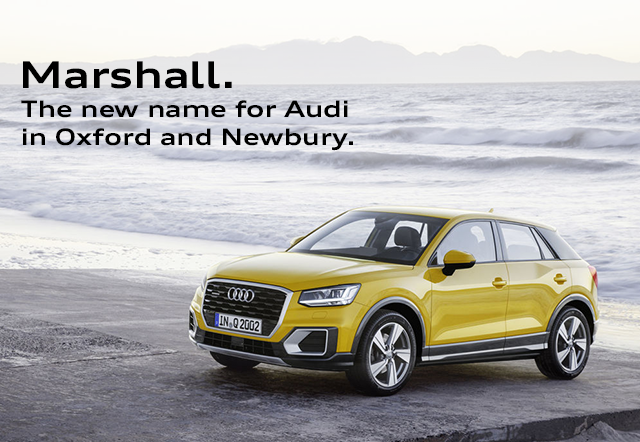
<style>
.page{position:relative;width:640px;height:442px}
.page>*{position:absolute;margin:0}
.t1{font:37px "AudiType-ExtendedBold";color:#000000}
.t2{font:22.7px "AudiType-ExtendedBold";color:#000000}
</style>
<div class="page">
<p class="t1" style="left:23px;top:61px;width:209px;height:28px">Marshall.</p>
<p class="t2" style="left:21px;top:100px;width:332px;height:51px">The new name for Audi<br>in Oxford and Newbury.</p>
</div>
